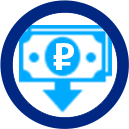
<style>
.page{position:relative;width:129px;height:129px;background:#ffffff}
.page>*{position:absolute;margin:0}
.t1{font:40.2px "MyriadPro-Bold";color:#ffffff}
</style>
<div class="page">
<p class="t1" style="left:53px;top:43px;width:21px;height:27px">₽</p>
</div>
